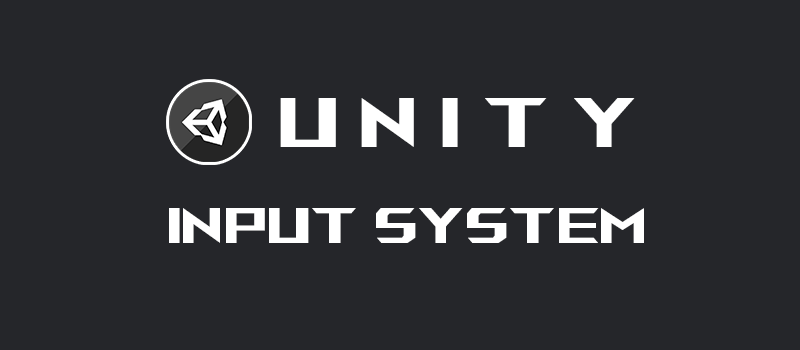
<style>
.page{position:relative;width:800px;height:350px;background:#25262a}
.page>*{position:absolute;margin:0}
.t1{font:70px "AniMeMatrix-MB_EN";color:#ffffff}
.t2{font:50px "AniMeMatrix-MB_EN";color:#ffffff}
</style>
<div class="page">
<p class="t1" style="left:280px;top:98px;width:355px;height:49px">U N I T Y</p>
<p class="t2" style="left:169px;top:208px;width:475px;height:35px">input system</p>
</div>
